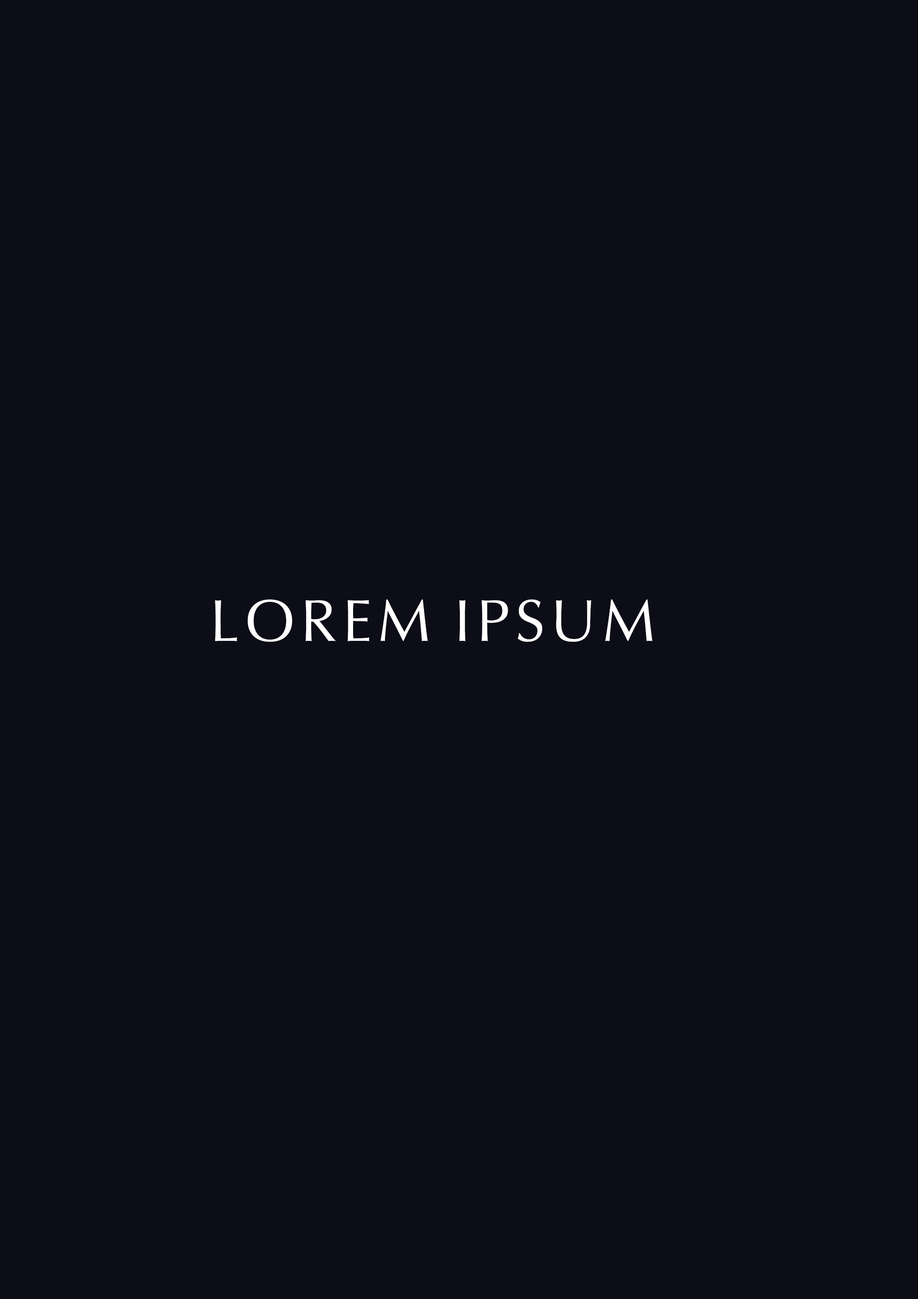
<style>
.page{position:relative;width:918px;height:1299px;background:#0d0d17}
.page>*{position:absolute;margin:0}
.t1{font:59.1px "Optima-Regular";letter-spacing:0.1em;color:#ffffff;text-transform:uppercase}
</style>
<div class="page">
<p class="t1" style="left:215px;top:599px;width:438px;height:43px">Lorem Ipsum</p>
</div>
